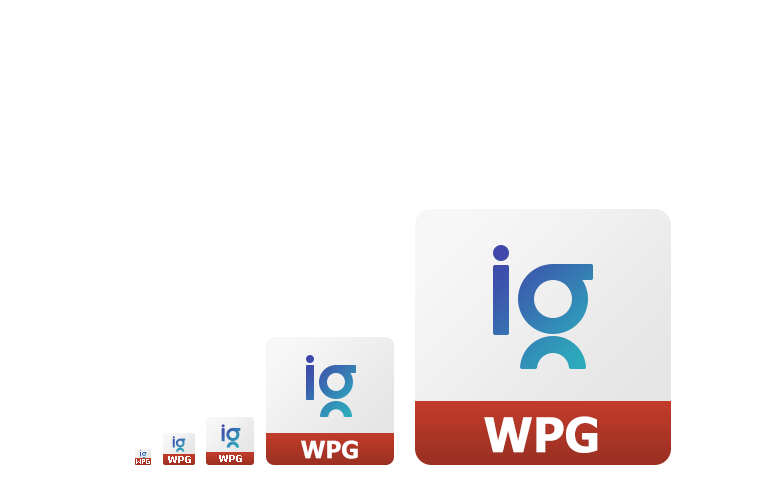
<style>
.page{position:relative;width:768px;height:480px;background:#ffffff}
.page>*{position:absolute;margin:0}
.t1{font:48px "Tahoma-Bold";color:#ffffff}
.t2{font:24px "Tahoma-Bold";color:#ffffff}
.t3{font:10px "Tahoma-Bold";color:#ffffff}
</style>
<div class="page">
<p class="t1" style="left:484px;top:416px;width:114px;height:37px">WPG</p>
<p class="t2" style="left:301px;top:440px;width:57px;height:19px">WPG</p>
<p class="t3" style="left:168px;top:456px;width:23px;height:7px">WPG</p>
<p class="t3" style="left:219px;top:455px;width:23px;height:7px">WPG</p>
</div>
